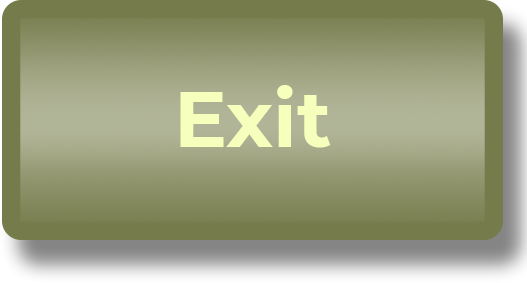
<style>
.page{position:relative;width:527px;height:283px}
.page>*{position:absolute;margin:0}
.t1{font:79.1px "Montserrat-Bold";color:#f6ffbb}
</style>
<div class="page">
<p class="t1" style="left:180px;top:85px;width:151px;height:63px">Exit</p>
</div>
